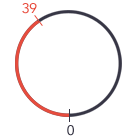
<style>
.page{position:relative;width:138px;height:137px;background:#ffffff}
.page>*{position:absolute;margin:0}
.t1{font:14px "Avenir-Roman";letter-spacing:-0.02em;color:#e84c3d;text-transform:uppercase}
.t2{font:14px "Avenir-Roman";letter-spacing:-0.02em;color:#373645;text-transform:uppercase}
</style>
<div class="page">
<p class="t1" style="left:22px;top:3px;width:15px;height:11px">39</p>
<p class="t2" style="left:67px;top:125px;width:7px;height:11px">0</p>
</div>
